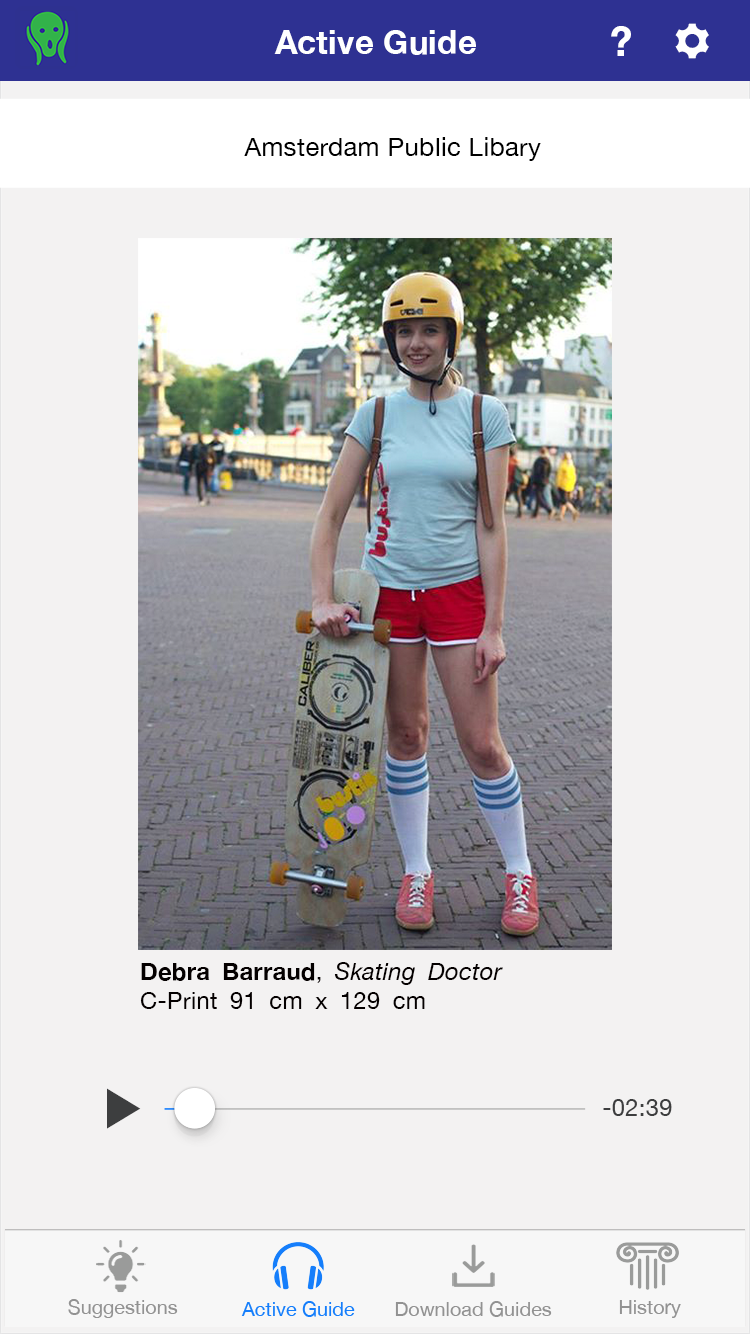
<style>
.page{position:relative;width:750px;height:1334px;background:#f3f2f2}
.page>*{position:absolute;margin:0}
.t1{font:32.6px "HelveticaNeue-Bold";letter-spacing:0.015em;color:#ffffff}
.t2{font:40.5px "HelveticaNeue-Bold";letter-spacing:0.015em;color:#ffffff}
.t3{font:25.7px "HelveticaNeue";letter-spacing:0.015em;color:#000000}
.t4{font:23.7px/29.3px "HelveticaNeue";letter-spacing:0.015em;color:#040000}
.t5{font:23.7px/29.3px "HelveticaNeue-Bold";letter-spacing:0.015em;color:#040000}
.t6{font:23.7px/29.3px "HelveticaNeue-Italic";letter-spacing:0.015em;color:#040000}
.t7{font:23.7px "HelveticaNeue";letter-spacing:0.015em;color:#3d3e3f}
.t8{font:19.8px "HelveticaNeue";color:#929292}
.t9{font:19.8px "HelveticaNeue";color:#157efb}
</style>
<div class="page">
<p class="t1" style="left:274px;top:30px;width:202px;height:25px">Active Guide</p>
<p class="t2" style="left:611px;top:26px;width:20px;height:30px">?</p>
<p class="t3" style="left:244px;top:137px;width:297px;height:24px">Amsterdam Public Libary</p>
<p class="t4" style="left:140px;top:962px;width:363px;height:47px"><span class="t5">Debra Barraud</span>, <span class="t6">Skating Doctor<br></span>C-Print 91 cm x 129 cm</p>
<p class="t7" style="left:603px;top:1099px;width:69px;height:17px">-02:39</p>
<p class="t8" style="left:68px;top:1299px;width:110px;height:19px">Suggestions</p>
<p class="t9" style="left:241px;top:1301px;width:114px;height:16px">Active Guide</p>
<p class="t8" style="left:395px;top:1301px;width:157px;height:16px">Download Guides</p>
<p class="t8" style="left:619px;top:1300px;width:62px;height:18px">History</p>
</div>
